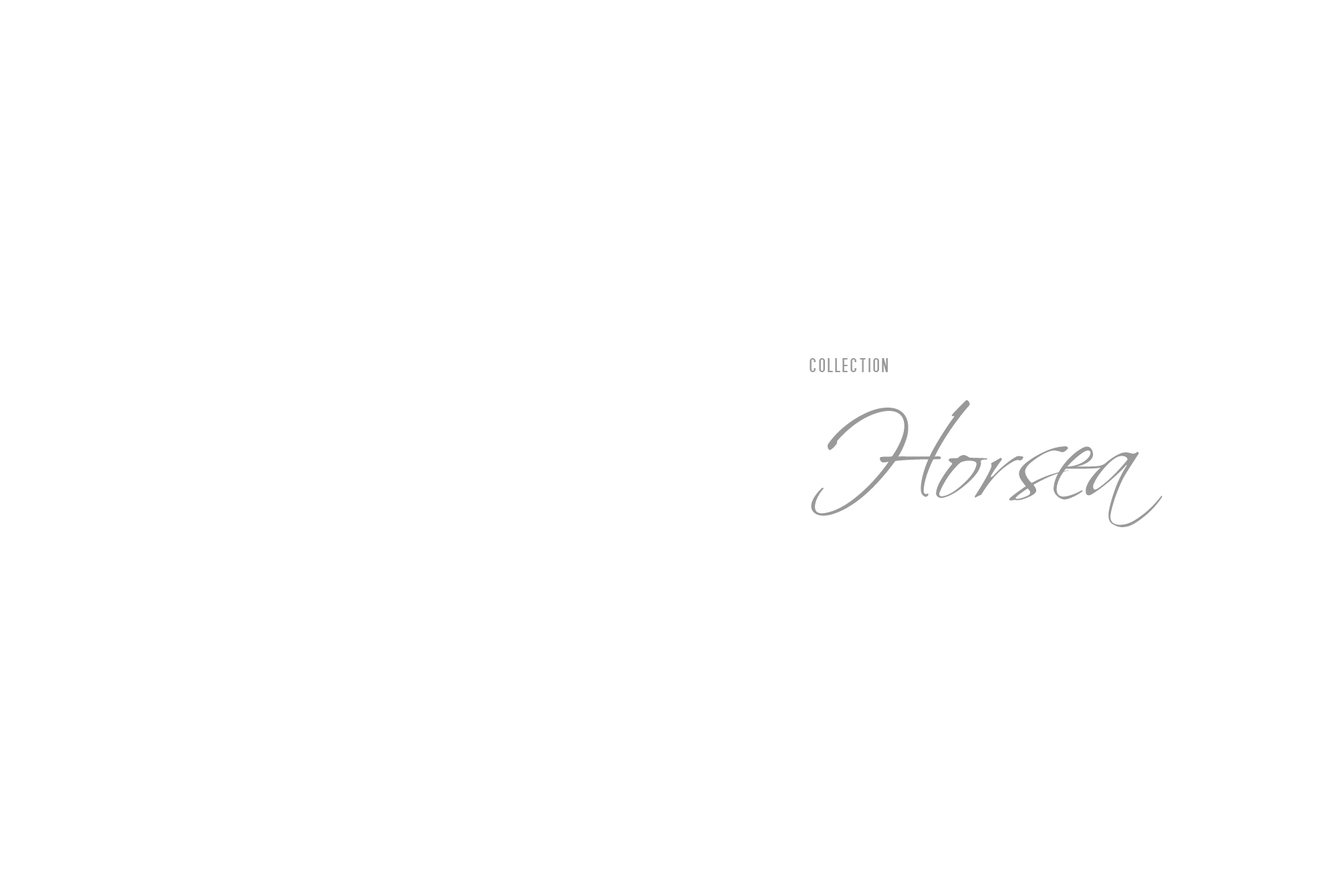
<style>
.page{position:relative;width:1337px;height:892px;background:#ffffff}
.page>*{position:absolute;margin:0}
.t1{font:23.4px "SFMoviePoster";color:#999999}
.t2{font:120.3px "ScriptinaPro";color:#999999}
</style>
<div class="page">
<p class="t1" style="left:809px;top:358px;width:78px;height:14px">collection</p>
<p class="t2" style="left:811px;top:400px;width:351px;height:127px">Horsea</p>
</div>
